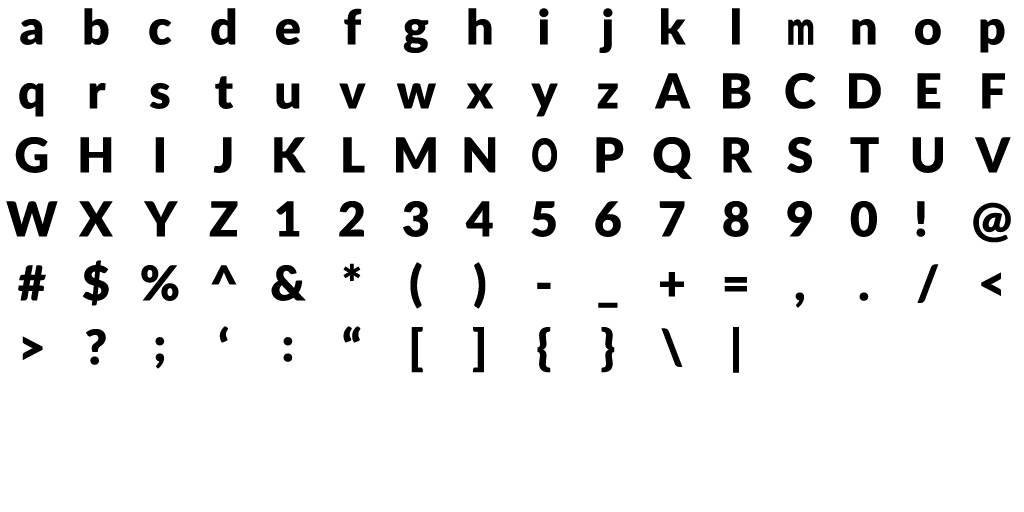
<style>
.page{position:relative;width:1024px;height:512px;background:#ffffff}
.page>*{position:absolute;margin:0}
.t1{font:48px "Lato-Black";letter-spacing:0.02em;color:#000000}
.t2{font:47.9px "Lato-Black";letter-spacing:0.02em;color:#000000;scale:0.69 1}
.t3{font:45.2px "Lato-Black";letter-spacing:0.02em;color:#000000;scale:0.72 1}
</style>
<div class="page">
<p class="t1" style="left:84px;top:8px;width:25px;height:37px">b</p>
<p class="t1" style="left:211px;top:8px;width:25px;height:37px">d</p>
<p class="t1" style="left:344px;top:8px;width:18px;height:37px">f</p>
<p class="t1" style="left:468px;top:8px;width:24px;height:37px">h</p>
<p class="t1" style="left:539px;top:8px;width:10px;height:37px">i</p>
<p class="t1" style="left:599px;top:8px;width:14px;height:45px">j</p>
<p class="t1" style="left:661px;top:8px;width:25px;height:37px">k</p>
<p class="t1" style="left:732px;top:8px;width:8px;height:37px">l</p>
<p class="t1" style="left:20px;top:19px;width:23px;height:26px">a</p>
<p class="t1" style="left:149px;top:19px;width:23px;height:26px">c</p>
<p class="t1" style="left:276px;top:19px;width:24px;height:26px">e</p>
<p class="t1" style="left:403px;top:19px;width:26px;height:34px">g</p>
<p class="t2" style="left:788px;top:19px;width:26px;height:26px">m</p>
<p class="t1" style="left:852px;top:19px;width:24px;height:26px">n</p>
<p class="t1" style="left:915px;top:19px;width:26px;height:26px">o</p>
<p class="t1" style="left:980px;top:19px;width:25px;height:34px">p</p>
<p class="t1" style="left:215px;top:76px;width:19px;height:33px">t</p>
<p class="t1" style="left:655px;top:73px;width:36px;height:36px">A</p>
<p class="t1" style="left:723px;top:73px;width:28px;height:36px">B</p>
<p class="t1" style="left:785px;top:73px;width:31px;height:36px">C</p>
<p class="t1" style="left:849px;top:73px;width:32px;height:36px">D</p>
<p class="t1" style="left:917px;top:73px;width:24px;height:36px">E</p>
<p class="t1" style="left:982px;top:73px;width:23px;height:36px">F</p>
<p class="t1" style="left:19px;top:83px;width:25px;height:34px">q</p>
<p class="t1" style="left:89px;top:83px;width:17px;height:26px">r</p>
<p class="t1" style="left:149px;top:83px;width:21px;height:26px">s</p>
<p class="t1" style="left:276px;top:83px;width:24px;height:26px">u</p>
<p class="t1" style="left:339px;top:83px;width:27px;height:26px">v</p>
<p class="t1" style="left:396px;top:83px;width:40px;height:26px">w</p>
<p class="t1" style="left:466px;top:83px;width:28px;height:26px">x</p>
<p class="t1" style="left:531px;top:83px;width:27px;height:34px">y</p>
<p class="t1" style="left:597px;top:83px;width:21px;height:26px">z</p>
<p class="t1" style="left:15px;top:137px;width:33px;height:36px">G</p>
<p class="t1" style="left:80px;top:137px;width:32px;height:36px">H</p>
<p class="t1" style="left:155px;top:137px;width:9px;height:36px">I</p>
<p class="t1" style="left:213px;top:137px;width:19px;height:36px">J</p>
<p class="t1" style="left:274px;top:137px;width:32px;height:36px">K</p>
<p class="t1" style="left:343px;top:137px;width:22px;height:36px">L</p>
<p class="t1" style="left:396px;top:137px;width:40px;height:36px">M</p>
<p class="t1" style="left:464px;top:137px;width:32px;height:36px">N</p>
<p class="t1" style="left:596px;top:137px;width:28px;height:36px">P</p>
<p class="t1" style="left:653px;top:137px;width:40px;height:42px">Q</p>
<p class="t1" style="left:723px;top:137px;width:30px;height:36px">R</p>
<p class="t1" style="left:787px;top:137px;width:25px;height:36px">S</p>
<p class="t1" style="left:850px;top:137px;width:29px;height:36px">T</p>
<p class="t1" style="left:912px;top:137px;width:31px;height:36px">U</p>
<p class="t1" style="left:975px;top:137px;width:36px;height:36px">V</p>
<p class="t3" style="left:532px;top:138px;width:26px;height:34px">O</p>
<p class="t1" style="left:6px;top:201px;width:52px;height:36px">W</p>
<p class="t1" style="left:79px;top:201px;width:34px;height:36px">X</p>
<p class="t1" style="left:144px;top:201px;width:34px;height:36px">Y</p>
<p class="t1" style="left:209px;top:201px;width:29px;height:36px">Z</p>
<p class="t1" style="left:276px;top:201px;width:24px;height:36px">1</p>
<p class="t1" style="left:339px;top:201px;width:25px;height:36px">2</p>
<p class="t1" style="left:403px;top:201px;width:25px;height:36px">3</p>
<p class="t1" style="left:465px;top:201px;width:28px;height:36px">4</p>
<p class="t1" style="left:531px;top:201px;width:25px;height:36px">5</p>
<p class="t1" style="left:595px;top:201px;width:26px;height:36px">6</p>
<p class="t1" style="left:659px;top:201px;width:26px;height:36px">7</p>
<p class="t1" style="left:723px;top:201px;width:26px;height:36px">8</p>
<p class="t1" style="left:787px;top:201px;width:25px;height:36px">9</p>
<p class="t1" style="left:850px;top:201px;width:27px;height:36px">0</p>
<p class="t1" style="left:916px;top:201px;width:10px;height:36px">!</p>
<p class="t1" style="left:973px;top:202px;width:38px;height:41px">@</p>
<p class="t1" style="left:18px;top:265px;width:28px;height:36px">#</p>
<p class="t1" style="left:82px;top:260px;width:27px;height:46px">$</p>
<p class="t1" style="left:141px;top:265px;width:38px;height:36px">%</p>
<p class="t1" style="left:211px;top:265px;width:26px;height:20px">^</p>
<p class="t1" style="left:271px;top:265px;width:35px;height:36px">&amp;</p>
<p class="t1" style="left:343px;top:263px;width:18px;height:18px">*</p>
<p class="t1" style="left:410px;top:262px;width:12px;height:47px">(</p>
<p class="t1" style="left:474px;top:262px;width:12px;height:47px">)</p>
<p class="t1" style="left:917px;top:264px;width:22px;height:39px">/</p>
<p class="t1" style="left:660px;top:272px;width:24px;height:25px">+</p>
<p class="t1" style="left:724px;top:277px;width:23px;height:15px">=</p>
<p class="t1" style="left:981px;top:272px;width:20px;height:24px">&lt;</p>
<p class="t1" style="left:537px;top:282px;width:14px;height:7px">-</p>
<p class="t1" style="left:795px;top:292px;width:10px;height:16px">,</p>
<p class="t1" style="left:859px;top:292px;width:10px;height:9px">.</p>
<p class="t1" style="left:598px;top:302px;width:20px;height:6px">_</p>
<p class="t1" style="left:86px;top:329px;width:20px;height:36px">?</p>
<p class="t1" style="left:219px;top:326px;width:9px;height:17px">‘</p>
<p class="t1" style="left:343px;top:326px;width:18px;height:17px">“</p>
<p class="t1" style="left:411px;top:327px;width:12px;height:46px">[</p>
<p class="t1" style="left:473px;top:327px;width:11px;height:46px">]</p>
<p class="t1" style="left:537px;top:327px;width:14px;height:46px">{</p>
<p class="t1" style="left:601px;top:327px;width:14px;height:46px">}</p>
<p class="t1" style="left:661px;top:328px;width:22px;height:39px">\</p>
<p class="t1" style="left:733px;top:327px;width:6px;height:46px">|</p>
<p class="t1" style="left:22px;top:336px;width:21px;height:24px">&gt;</p>
<p class="t1" style="left:155px;top:337px;width:10px;height:32px">;</p>
<p class="t1" style="left:283px;top:337px;width:10px;height:25px">:</p>
</div>
